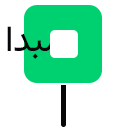
<style>
.page{position:relative;width:128px;height:128px;background:#ffffff}
.page>*{position:absolute;margin:0}
.t1{font:36px "Vazirmatn-Regular";color:#070709}
</style>
<div class="page">
<p class="t1" style="left:7px;top:26px;width:56px;height:33px">مبدا</p>
</div>
